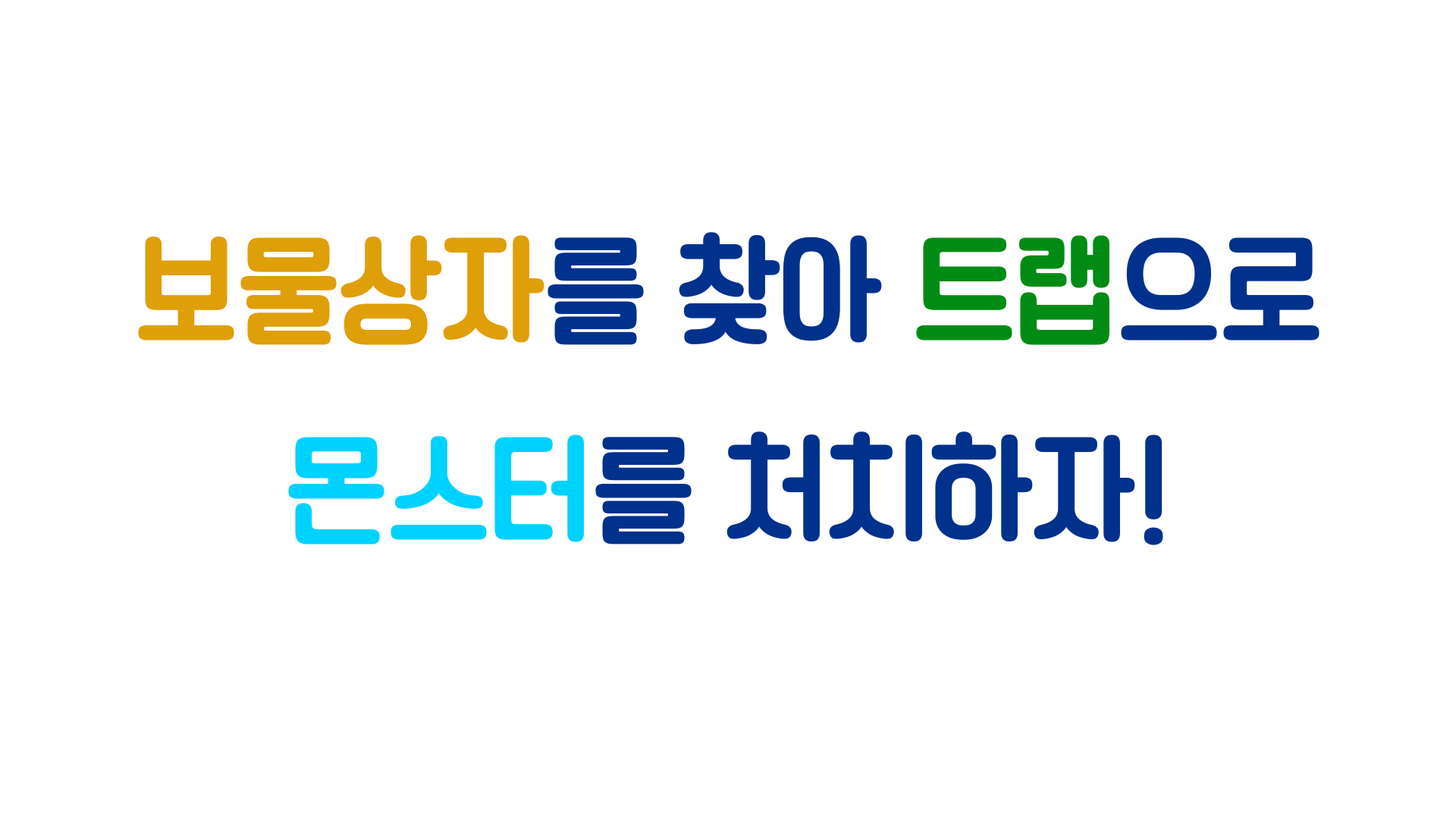
<style>
.page{position:relative;width:1456px;height:819px;background:#ffffff}
.page>*{position:absolute;margin:0}
.t1{font:113.7px "TTChungchunsidaeR";color:#00318c}
.t2{font:113.7px "TTChungchunsidaeR";color:#de9f09}
.t3{font:113.7px "TTChungchunsidaeR";color:#008c14}
.t4{font:113.7px "TTChungchunsidaeR";color:#00d2ff}
</style>
<div class="page">
<p class="t1" style="left:138px;top:232px;width:1181px;height:313px;text-align:center"><span class="t2">보물상자</span>를 찾아 <span class="t3">트랩</span>으로<br><span class="t4">몬스터</span>를 처치하자!</p>
</div>
